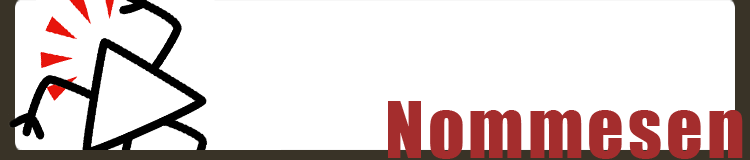
<style>
.page{position:relative;width:750px;height:160px;background:#ffffff}
.page>*{position:absolute;margin:0}
.t1{font:72px "Impact";letter-spacing:0.055em;color:#a42d2d}
</style>
<div class="page">
<p class="t1" style="left:388px;top:101px;width:355px;height:58px">Nommesen</p>
</div>
